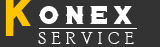
<style>
.page{position:relative;width:160px;height:47px;background:#333333}
.page>*{position:absolute;margin:0}
.t1{font:37.3px "Portico-Regular";letter-spacing:0.42em;color:#ffc400;text-transform:uppercase}
.t2{font:25.7px "Portico-Diablo";letter-spacing:0.2em;color:#ffffff;text-transform:uppercase}
.t3{font:16.7px "PoorRichard-Regular";letter-spacing:0.34em;color:#ffffff;text-transform:uppercase}
</style>
<div class="page">
<p class="t1" style="left:6px;top:0px;width:25px;height:26px">K</p>
<p class="t2" style="left:39px;top:6px;width:93px;height:18px">onex</p>
<p class="t3" style="left:38px;top:32px;width:96px;height:12px">SERVICE</p>
</div>
